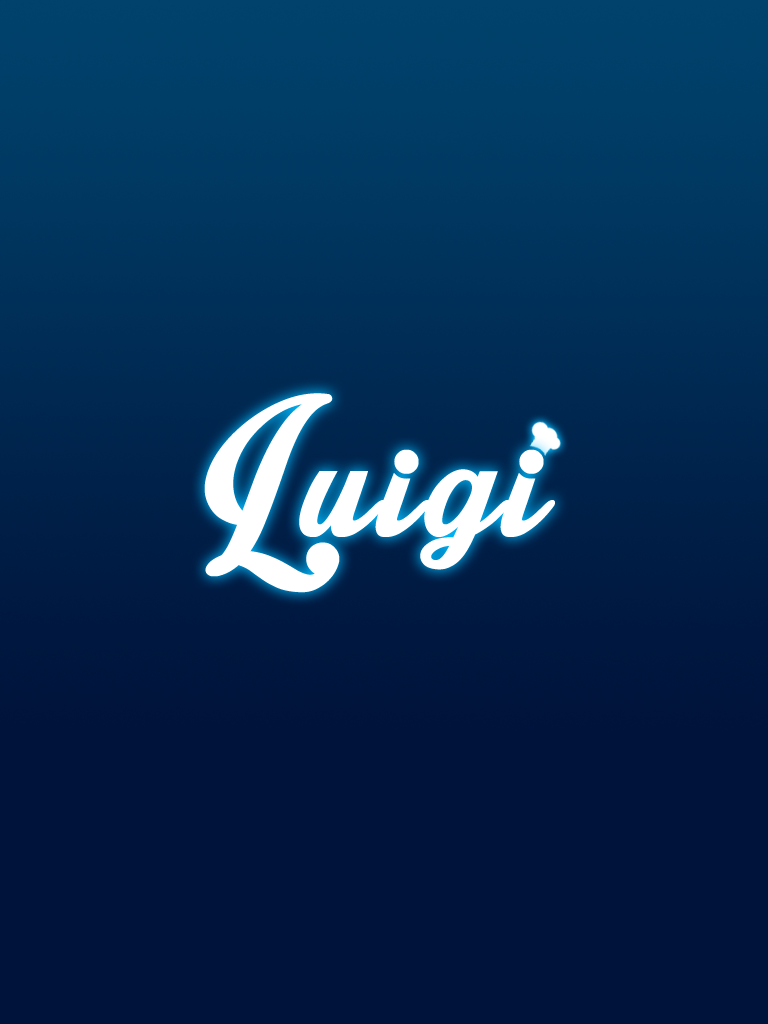
<style>
.page{position:relative;width:768px;height:1024px}
.page>*{position:absolute;margin:0}
.t1{font:250px "IntriqueScriptPersonalUse";letter-spacing:0.025em;color:#ffffff}
</style>
<div class="page">
<p class="t1" style="left:204px;top:393px;width:351px;height:200px">Luigi</p>
</div>
